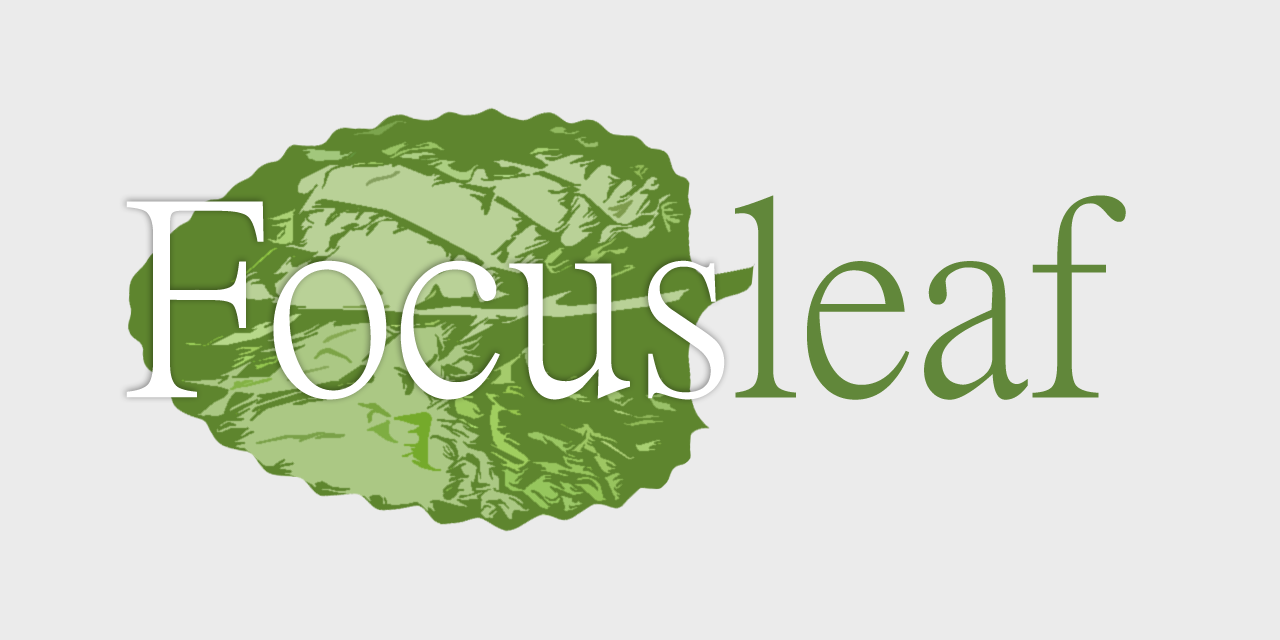
<style>
.page{position:relative;width:1280px;height:640px;background:#ebebeb}
.page>*{position:absolute;margin:0}
.t1{font:272px "PMingLiU-ExtB";color:#61873a}
.t2{font:272px "PMingLiU-ExtB";color:#ffffff}
</style>
<div class="page">
<p class="t1" style="left:735px;top:195px;width:391px;height:205px">leaf</p>
<p class="t2" style="left:126px;top:201px;width:599px;height:199px">Focus</p>
</div>
